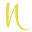
<style>
.page{position:relative;width:32px;height:32px;background:#ffffff}
.page>*{position:absolute;margin:0}
.t1{font:30.6px "Montez-Regular";color:#e2d951}
</style>
<div class="page">
<p class="t1" style="left:6px;top:2px;width:24px;height:29px">N</p>
</div>
